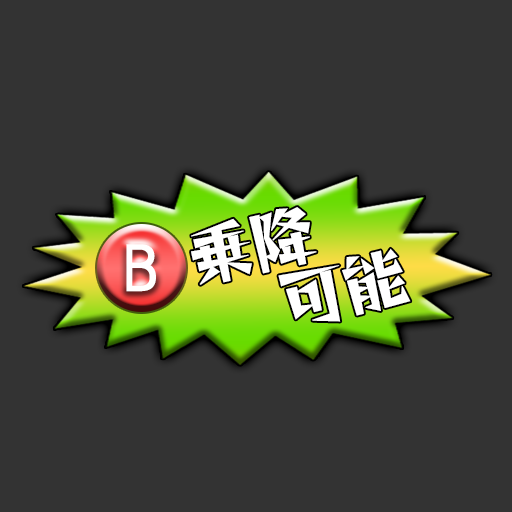
<style>
.page{position:relative;width:512px;height:512px;background:#333333}
.page>*{position:absolute;margin:0}
.t1{font:66.7px "ReggaeOne-Regular";letter-spacing:-0.05em;color:#ffffff;font-variant:small-caps}
.t2{font:58.3px "HGPGothicE";letter-spacing:0.05em;color:#ffffff;font-variant:small-caps}
</style>
<div class="page">
<p class="t1" style="left:191px;top:207px;width:126px;height:78px;rotate:-13deg">乗降</p>
<p class="t2" style="left:126px;top:244px;width:30px;height:48px">B</p>
<p class="t1" style="left:278px;top:248px;width:133px;height:74px;rotate:-14deg">可能</p>
</div>
